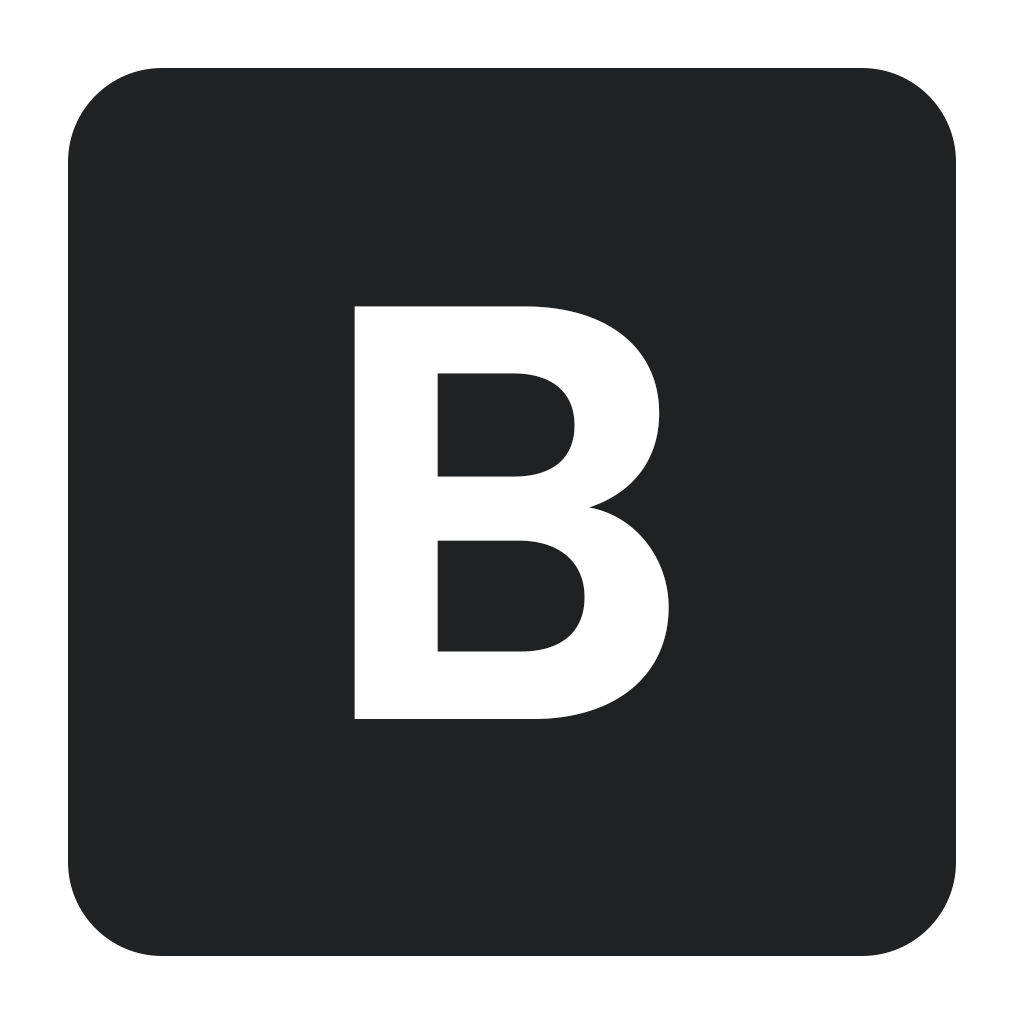
<style>
.page{position:relative;width:1024px;height:1024px;background:#202123}
.page>*{position:absolute;margin:0}
.t1{font:590.9px "Poppins-SemiBold";letter-spacing:-0.025em;color:#ffffff}
</style>
<div class="page">
<p class="t1" style="left:354px;top:306px;width:315px;height:413px">B</p>
</div>
